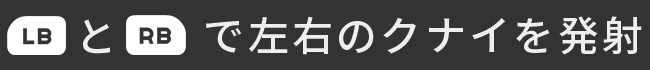
<style>
.page{position:relative;width:650px;height:70px;background:#333333}
.page>*{position:absolute;margin:0}
.t1{font:41px "SourceHanSansJP-Medium";letter-spacing:0.08em;color:#eeeeee}
</style>
<div class="page">
<p class="t1" style="left:206px;top:16px;width:436px;height:39px">で左右のクナイを発射</p>
<p class="t1" style="left:83px;top:19px;width:27px;height:35px">と</p>
</div>
